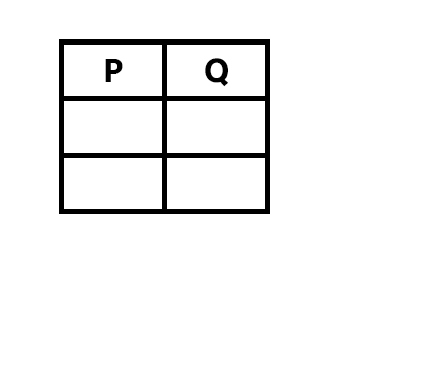
<style>
.page{position:relative;width:431px;height:365px;background:#ffffff}
.page>*{position:absolute;margin:0}
.t1{font:33.3px "SegoeUIVariable-BoldText";color:#000000}
</style>
<div class="page">
<p class="t1" style="left:105px;top:59px;width:18px;height:23px">P</p>
<p class="t1" style="left:205px;top:58px;width:23px;height:29px">Q</p>
</div>
